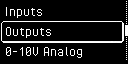
<style>
.page{position:relative;width:128px;height:64px;background:#000000}
.page>*{position:absolute;margin:0}
.t1{font:16px "PixelOperator";color:#ffffff}
</style>
<div class="page">
<p class="t1" style="left:5px;top:7px;width:37px;height:11px">Inputs</p>
<p class="t1" style="left:5px;top:27px;width:46px;height:11px">Outputs</p>
<p class="t1" style="left:5px;top:47px;width:77px;height:11px">0-10V Analog</p>
</div>
